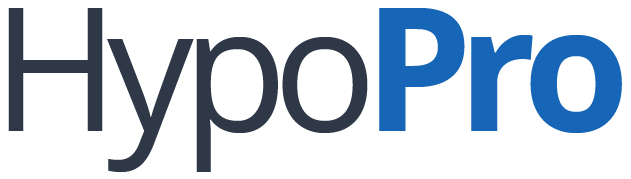
<style>
.page{position:relative;width:631px;height:179px;background:#ffffff}
.page>*{position:absolute;margin:0}
.t1{font:172px "OpenSans";letter-spacing:-0.06em;color:#2e3846}
.t2{font:172px "OpenSans-Bold";letter-spacing:-0.05em;color:#1765b6}
</style>
<div class="page">
<p class="t1" style="left:8px;top:8px;width:614px;height:164px">Hypo<span class="t2">Pro</span></p>
</div>
